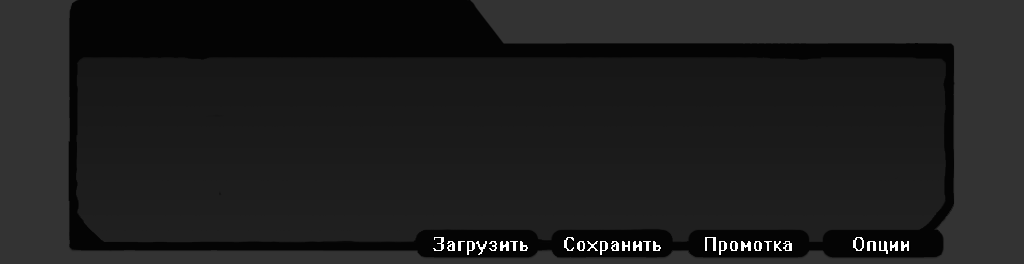
<style>
.page{position:relative;width:1024px;height:264px;background:#333333}
.page>*{position:absolute;margin:0}
.t1{font:18px "System";color:#ffffff}
</style>
<div class="page">
<p class="t1" style="left:432px;top:237px;width:97px;height:19px">Загрузить</p>
<p class="t1" style="left:564px;top:237px;width:98px;height:19px">Сохранить</p>
<p class="t1" style="left:704px;top:237px;width:88px;height:19px">Промотка</p>
<p class="t1" style="left:853px;top:237px;width:57px;height:17px">Опции</p>
</div>
